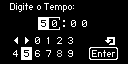
<style>
.page{position:relative;width:128px;height:64px;background:#000000}
.page>*{position:absolute;margin:0}
.t1{font:16px "HaxrCorp-4089";color:#ffffff}
.t2{font:16px "HaxrCorp-4089";color:#010101}
.t3{font:16px "HaxrCorp-4089";color:#000000}
.t4{font:16px "HaxrCorp-4089";color:#dddddd}
</style>
<div class="page">
<p class="t1" style="left:10px;top:3px;width:64px;height:9px">Digite o Tempo:</p>
<p class="t2" style="left:41px;top:20px;width:5px;height:7px">5</p>
<p class="t1" style="left:52px;top:20px;width:5px;height:7px">0</p>
<p class="t1" style="left:71px;top:20px;width:5px;height:7px">0</p>
<p class="t1" style="left:82px;top:20px;width:5px;height:7px">0</p>
<p class="t1" style="left:35px;top:37px;width:5px;height:7px">0</p>
<p class="t1" style="left:47px;top:37px;width:2px;height:7px">1</p>
<p class="t1" style="left:57px;top:37px;width:5px;height:7px">2</p>
<p class="t1" style="left:68px;top:37px;width:5px;height:7px">3</p>
<p class="t1" style="left:13px;top:50px;width:5px;height:7px">4</p>
<p class="t3" style="left:24px;top:50px;width:5px;height:7px">5</p>
<p class="t1" style="left:35px;top:50px;width:5px;height:7px">6</p>
<p class="t1" style="left:46px;top:50px;width:5px;height:7px">7</p>
<p class="t4" style="left:57px;top:50px;width:5px;height:7px">8</p>
<p class="t1" style="left:68px;top:50px;width:5px;height:7px">9</p>
<p class="t1" style="left:92px;top:50px;width:23px;height:7px">Enter</p>
</div>
